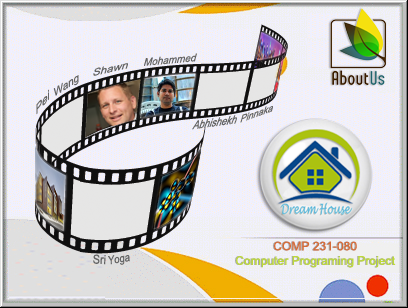
<style>
.page{position:relative;width:408px;height:308px}
.page>*{position:absolute;margin:0}
.t1{font:11px "ArialNarrow";color:#646464;scale:1.1 1}
.t2{font:10.9px "ArialNarrow";color:#646464;scale:1.33 1}
.t3{font:11.4px "ArialNarrow";color:#646464;scale:1.23 1}
.t4{font:13.3px "ArialNarrow";color:#646464;scale:1.38 1}
.t5{font:11.1px "ArialNarrow";color:#646464;scale:1.05 1}
.t6{font:12.6px "ArialNarrow";color:#646464;scale:0.91 1}
.t7{font:12.1px "ArialMT";color:#bdda38}
.t8{font:12.1px "ArialMT";color:#d66b37}
.t9{font:12.6px "ArialNarrow";color:#646464;scale:1.05 1}
.t10{font:11.6px "ArialNarrow";color:#646464}
</style>
<div class="page">
<p class="t1" style="left:144px;top:53px;width:53px;height:13px;rotate:-5deg">Mohammed</p>
<p class="t2" style="left:93px;top:63px;width:35px;height:13px;rotate:-13deg">Shawn</p>
<p class="t3" style="left:53px;top:75px;width:26px;height:21px;rotate:-33deg">Wang</p>
<p class="t4" style="left:36px;top:89px;width:13px;height:26px;rotate:-51deg">Pei</p>
<p class="t5" style="left:240px;top:106px;width:33px;height:17px;rotate:-20deg">Pinnaka</p>
<p class="t6" style="left:192px;top:115px;width:45px;height:15px;rotate:-8deg">Abhishekh</p>
<p class="t7" style="left:236px;top:241px;width:160px;height:27px;text-align:center"><span class="t8">COMP 231-080<br></span>Computer Programing Project</p>
<p class="t9" style="left:93px;top:254px;width:13px;height:11px;rotate:3deg">Sri</p>
<p class="t10" style="left:108px;top:255px;width:22px;height:10px;rotate:-9deg">Yoga</p>
</div>
